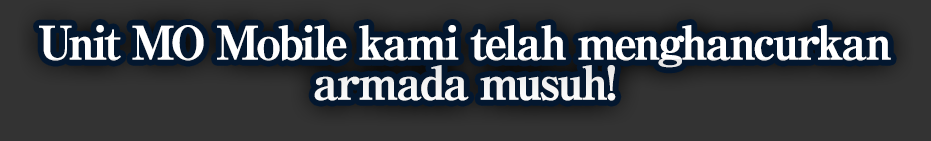
<style>
.page{position:relative;width:931px;height:141px;background:#333333}
.page>*{position:absolute;margin:0}
.t1{font:46px/40px "RyuminPro-ExBold";letter-spacing:-0.08em;color:#ffffff;font-weight:bold}
</style>
<div class="page">
<p class="t1" style="left:39px;top:25px;width:852px;height:76px;text-align:center">Unit MO Mobile kami telah menghancurkan<br>armada musuh!</p>
</div>
